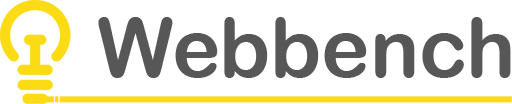
<style>
.page{position:relative;width:512px;height:104px;background:#ffffff}
.page>*{position:absolute;margin:0}
.t1{font:82px "ArialRoundedMTBold";color:#575757}
</style>
<div class="page">
<p class="t1" style="left:98px;top:17px;width:413px;height:61px">Webbench</p>
</div>
